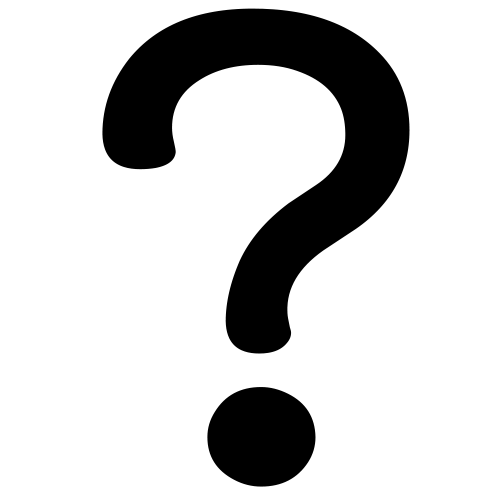
<style>
.page{position:relative;width:500px;height:500px;background:#ffffff}
.page>*{position:absolute;margin:0}
.t1{font:625px "MDArt";color:#000000}
</style>
<div class="page">
<p class="t1" style="left:102px;top:8px;width:308px;height:479px">?</p>
</div>
